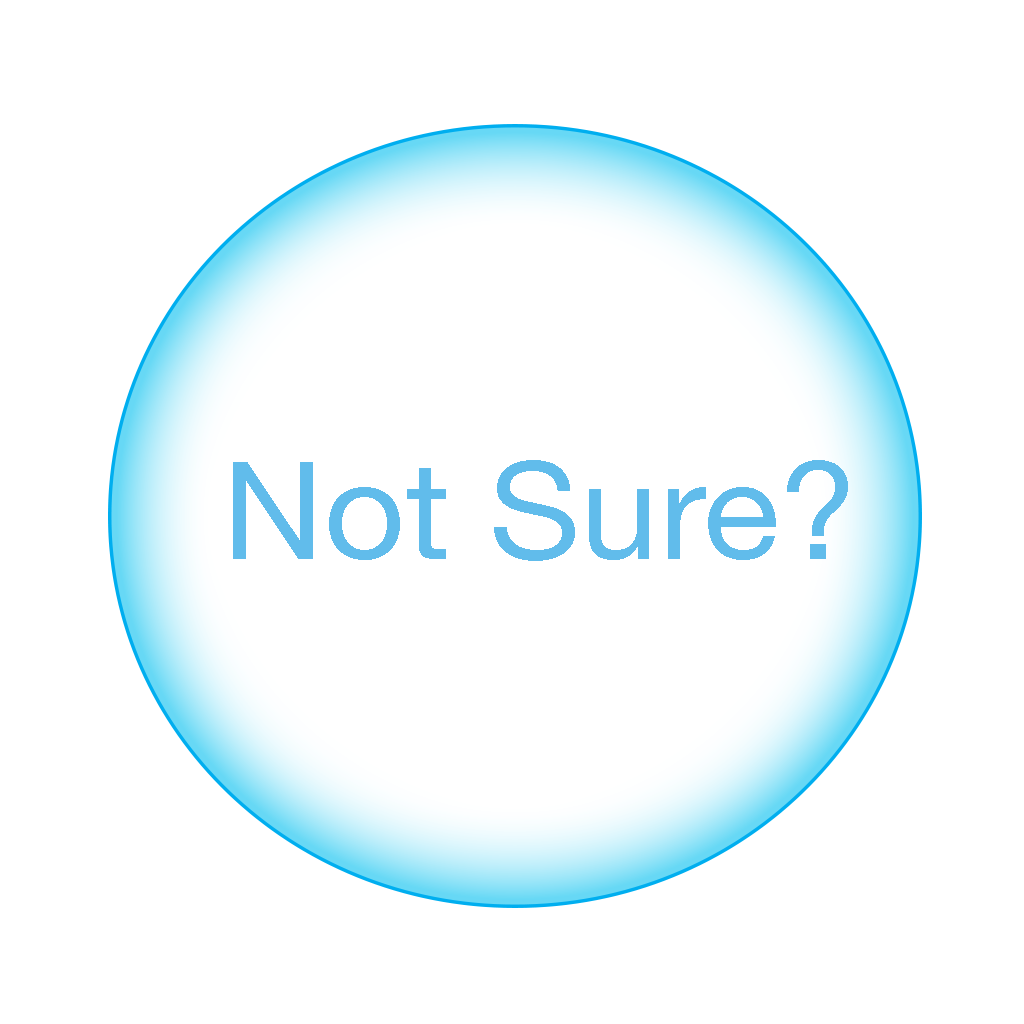
<style>
.page{position:relative;width:1024px;height:1024px;background:#ffffff}
.page>*{position:absolute;margin:0}
.t1{font:135.9px "HelveticaNeue";color:#61bceb;scale:1.04 1}
</style>
<div class="page">
<p class="t1" style="left:233px;top:460px;width:615px;height:101px">Not Sure?</p>
</div>
